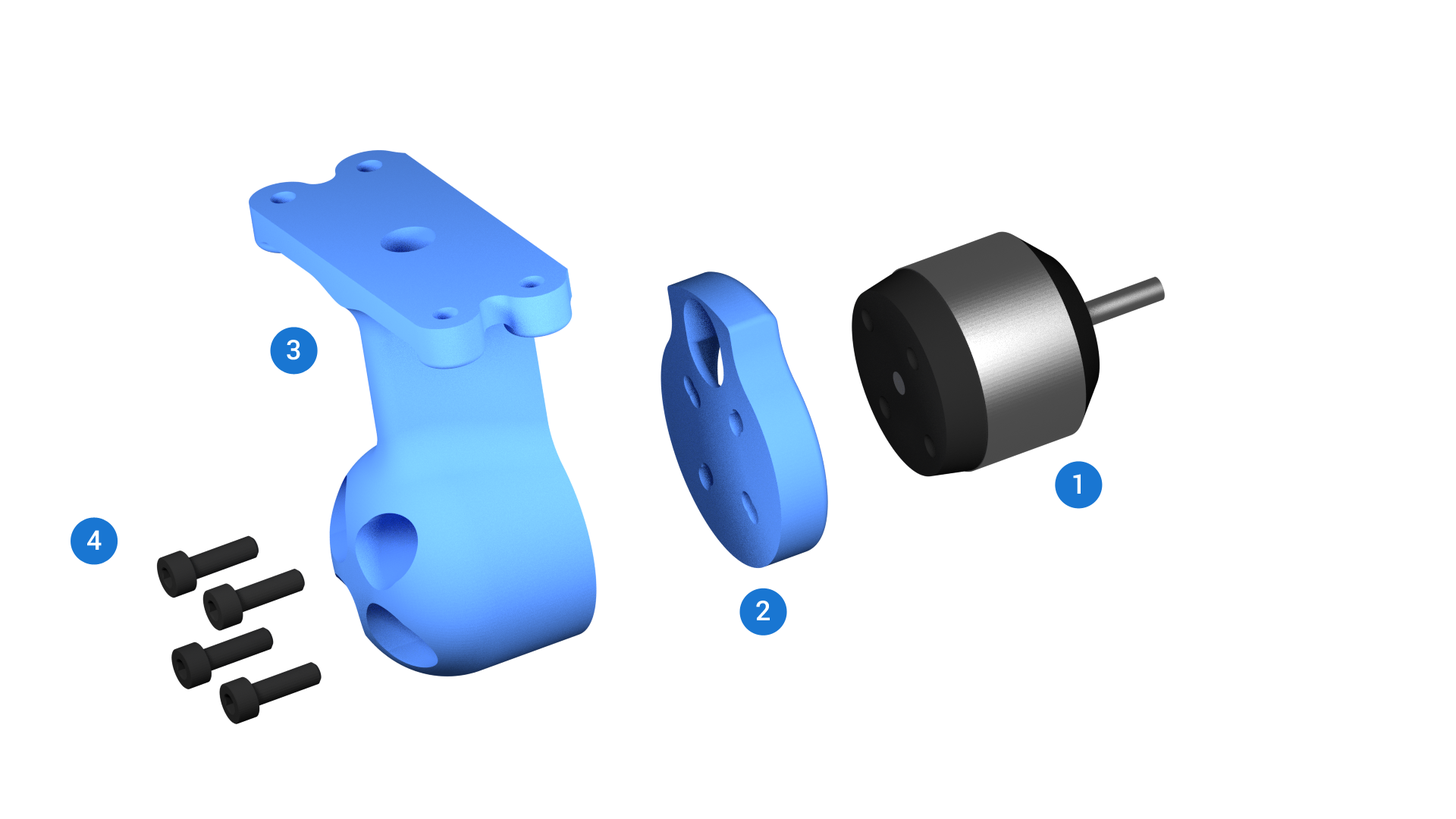
<style>
.page{position:relative;width:1456px;height:819px;background:#ffffff}
.page>*{position:absolute;margin:0}
.t1{font:27.3px "Roboto-Medium";color:#ffffff}
</style>
<div class="page">
<p class="t1" style="left:287px;top:340px;width:13px;height:20px">3</p>
<p class="t1" style="left:1073px;top:474px;width:8px;height:20px">1</p>
<p class="t1" style="left:87px;top:530px;width:15px;height:20px">4</p>
<p class="t1" style="left:756px;top:601px;width:14px;height:19px">2</p>
</div>
